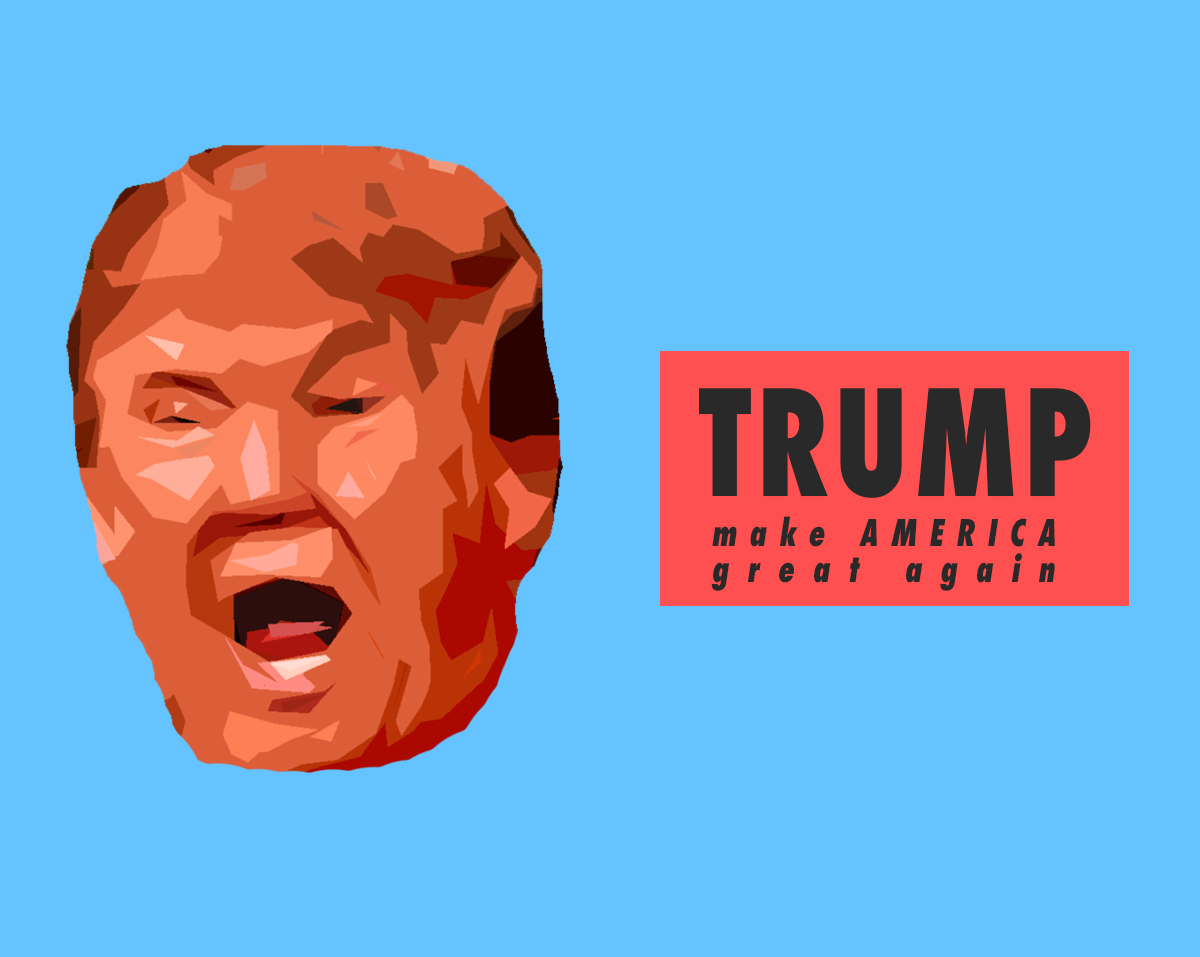
<style>
.page{position:relative;width:1200px;height:957px;background:#65c3ff}
.page>*{position:absolute;margin:0}
.t1{font:35.7px/50px "Futura-CondensedExtraBold";letter-spacing:0.43em;color:#292929;font-style:italic;scale:0.84 1}
.t2{font:142.8px/50px "Futura-CondensedExtraBold";letter-spacing:0.05em;color:#292929;scale:0.84 1}
.t3{font:35.7px "Futura-CondensedExtraBold";letter-spacing:0.62em;color:#292929;font-style:italic;scale:0.84 1}
</style>
<div class="page">
<p class="t1" style="left:699px;top:388px;width:392px;height:203px"><span class="t2">TRUMP<br> </span>make AMERICA<br> <span class="t3">great again</span></p>
</div>
